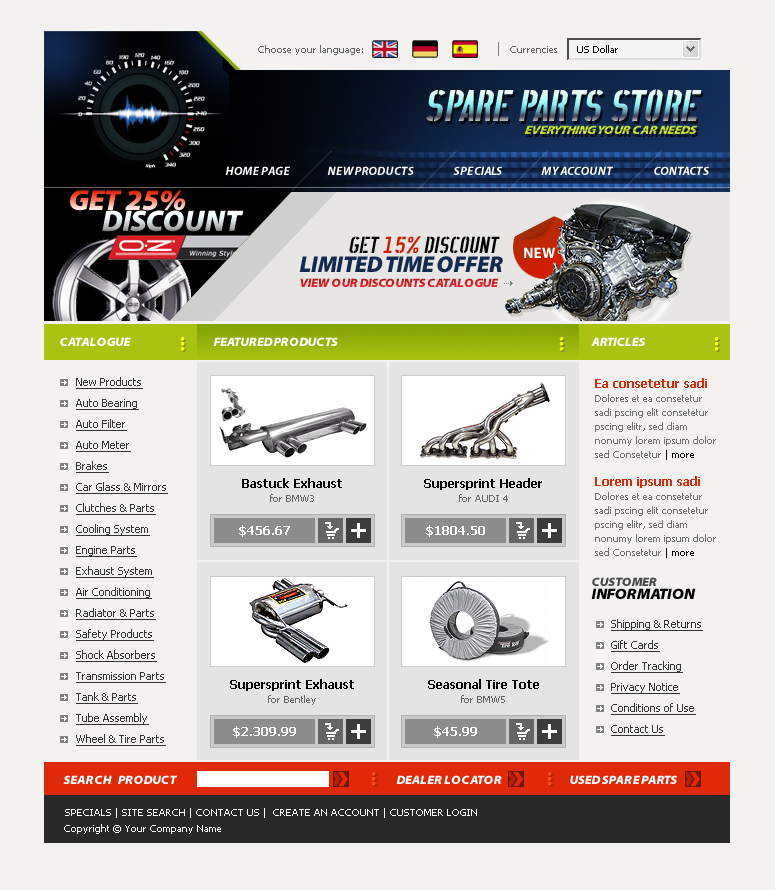
<style>
.page{position:relative;width:775px;height:890px;background:#f3f2f0}
.page>*{position:absolute;margin:0}
.t1{font:10px "Tahoma";color:#636363}
.t2{font:10px "Tahoma";color:#000000}
.t3{font:44px "CANoDrAlarm";letter-spacing:-0.01em;font-style:italic}
.t4{font:12px "MyriadPro-BlackSemiExtIt";letter-spacing:-0.01em;font-style:italic}
.t5{font:12px "MyriadPro-BoldIt";color:#ffffff}
.t6{font:30px/21px "MyriadPro-BlackIt";letter-spacing:-0.01em}
.t7{font:23px "CANoDrAlarm";letter-spacing:-0.01em;color:#000000;font-style:italic}
.t8{font:23px "CANoDrAlarm";letter-spacing:-0.01em;color:#cf1e01;font-style:italic}
.t9{font:23px "MyriadPro-BlackIt";letter-spacing:-0.01em;color:#122950}
.t10{font:15px "MyriadPro-Bold";color:#ffffff;text-transform:uppercase}
.t11{font:12px "MyriadPro-BlackSemiExtIt";letter-spacing:-0.01em}
.t12{font:12px "MyriadPro-BlackSemiExtIt";letter-spacing:-0.01em;color:#ffffff}
.t13{font:11px/21px "Tahoma";color:#333333;text-decoration:underline}
.t14{font:10px/14px "Tahoma";color:#6f6f6f}
.t15{font:12px/14px "Tahoma-Bold";color:#e02909}
.t16{font:10px/14px "Tahoma";color:#000000}
.t17{font:12px/10px "Tahoma-Bold";color:#000000}
.t18{font:10px/14px "Tahoma";color:#636363}
.t19{font:12px "Tahoma-Bold";color:#ffffff}
.t20{font:15px/13px "MyriadPro-BlackSemiExtIt";letter-spacing:-0.01em;color:#000000}
.t21{font:12px/13px "MyriadPro-BlackSemiExtIt";letter-spacing:-0.01em;color:#474747}
.t22{font:12px "MyriadPro-BlackSemiExtIt";color:#ffffff}
.t23{font:10px "Tahoma";color:#ffffff;text-transform:uppercase}
.t24{font:10px "Tahoma";color:#ffffff}
</style>
<div class="page">
<p class="t1" style="left:258px;top:45px;width:105px;height:10px">Choose your language:</p>
<p class="t1" style="left:510px;top:46px;width:47px;height:7px">Currencies</p>
<p class="t2" style="left:577px;top:45px;width:41px;height:8px">US Dollar</p>
<p class="t3" style="left:426px;top:89px;width:276px;height:33px">SPARE PARTS STORE</p>
<p class="t4" style="left:524px;top:125px;width:174px;height:9px">EVERYTHING YOUR CAR NEEDS</p>
<p class="t5" style="left:225px;top:166px;width:65px;height:9px">HOME PAGE</p>
<p class="t5" style="left:327px;top:166px;width:87px;height:9px">NEW PRODUCTS</p>
<p class="t5" style="left:453px;top:166px;width:49px;height:9px">SPECIALS</p>
<p class="t5" style="left:541px;top:166px;width:73px;height:9px">MY ACCOUNT</p>
<p class="t5" style="left:654px;top:166px;width:55px;height:9px">CONTACTS</p>
<p class="t6" style="left:70px;top:189px;width:174px;height:43px">GET 25% <br>       DISCOUNT</p>
<p class="t7" style="left:349px;top:236px;width:151px;height:18px">GET <span class="t8">15% </span>DISCOUNT</p>
<p class="t9" style="left:299px;top:256px;width:204px;height:17px">LIMITED TIME OFFER</p>
<p class="t10" style="left:524px;top:247px;width:32px;height:11px">NEW</p>
<p class="t11" style="left:300px;top:278px;width:199px;height:9px">VIEW OUR DISCOUNTS CATALOGUE</p>
<p class="t12" style="left:60px;top:337px;width:71px;height:9px">CATALOGUE</p>
<p class="t12" style="left:213px;top:337px;width:125px;height:9px">FEATURED PRODUCTS</p>
<p class="t12" style="left:591px;top:337px;width:55px;height:9px">ARTICLES</p>
<p class="t13" style="left:76px;top:377px;width:92px;height:369px">New Products<br>Auto Bearing<br>Auto Filter<br>Auto Meter<br>Brakes<br>Car Glass &amp; Mirrors<br>Clutches &amp; Parts<br>Cooling System<br>Engine Parts<br>Exhaust System<br>Air Conditioning<br>Radiator &amp; Parts<br>Safety Products<br>Shock Absorbers<br>Transmission Parts<br>Tank &amp; Parts<br>Tube Assembly<br>Wheel &amp; Tire Parts</p>
<p class="t14" style="left:595px;top:378px;width:121px;height:180px"><span class="t15">Ea consetetur sadi </span>Dolores et ea consetetur sadi pscing elit consetetur pscing elitr, sed diam nonumy lorem ipsum dolor sed Consetetur <span class="t16">| more<br><br></span><span class="t15">Lorem ipsum sadi </span>Dolores et ea consetetur sadi pscing elit consetetur pscing elitr, sed diam nonumy lorem ipsum dolor sed Consetetur <span class="t16">| more</span></p>
<p class="t17" style="left:242px;top:478px;width:100px;height:24px;text-align:center">Bastuck Exhaust <br><span class="t18">for BMW3</span></p>
<p class="t17" style="left:424px;top:478px;width:118px;height:24px;text-align:center">Supersprint Header<br><span class="t18">for AUDI 4</span></p>
<p class="t19" style="left:239px;top:525px;width:51px;height:12px">$456.67</p>
<p class="t19" style="left:426px;top:525px;width:59px;height:12px">$1804.50</p>
<p class="t20" style="left:591px;top:577px;width:105px;height:22px"><span class="t21">CUSTOMER <br></span>INFORMATION</p>
<p class="t13" style="left:611px;top:619px;width:92px;height:117px">Shipping &amp; Returns<br>Gift Cards<br>Order Tracking<br>Privacy Notice<br>Conditions of Use<br>Contact Us</p>
<p class="t17" style="left:230px;top:679px;width:124px;height:26px;text-align:center">Supersprint Exhaust <br><span class="t18">for Bentley</span></p>
<p class="t17" style="left:428px;top:679px;width:111px;height:24px;text-align:center">Seasonal Tire Tote<br><span class="t18">for BMW5</span></p>
<p class="t19" style="left:233px;top:726px;width:63px;height:12px">$2.309.99</p>
<p class="t19" style="left:434px;top:726px;width:43px;height:12px">$45.99</p>
<p class="t22" style="left:63px;top:775px;width:115px;height:9px">SEARCH    PRODUCT</p>
<p class="t22" style="left:396px;top:775px;width:106px;height:9px">DEALER LOCATOR</p>
<p class="t22" style="left:570px;top:775px;width:107px;height:9px">USED SPARE PARTS</p>
<p class="t23" style="left:65px;top:808px;width:412px;height:10px">Specials | Site Search | Contact Us |  Create an Account | Customer Login</p>
<p class="t24" style="left:64px;top:824px;width:157px;height:10px">Copyright © Your Company Name</p>
</div>
